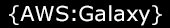
<style>
.page{position:relative;width:170px;height:28px;background:#000000}
.page>*{position:absolute;margin:0}
.t1{font:20.8px "Verdana";color:#ffffff}
</style>
<div class="page">
<p class="t1" style="left:9px;top:5px;width:153px;height:21px">{AWS:Galaxy}</p>
</div>
